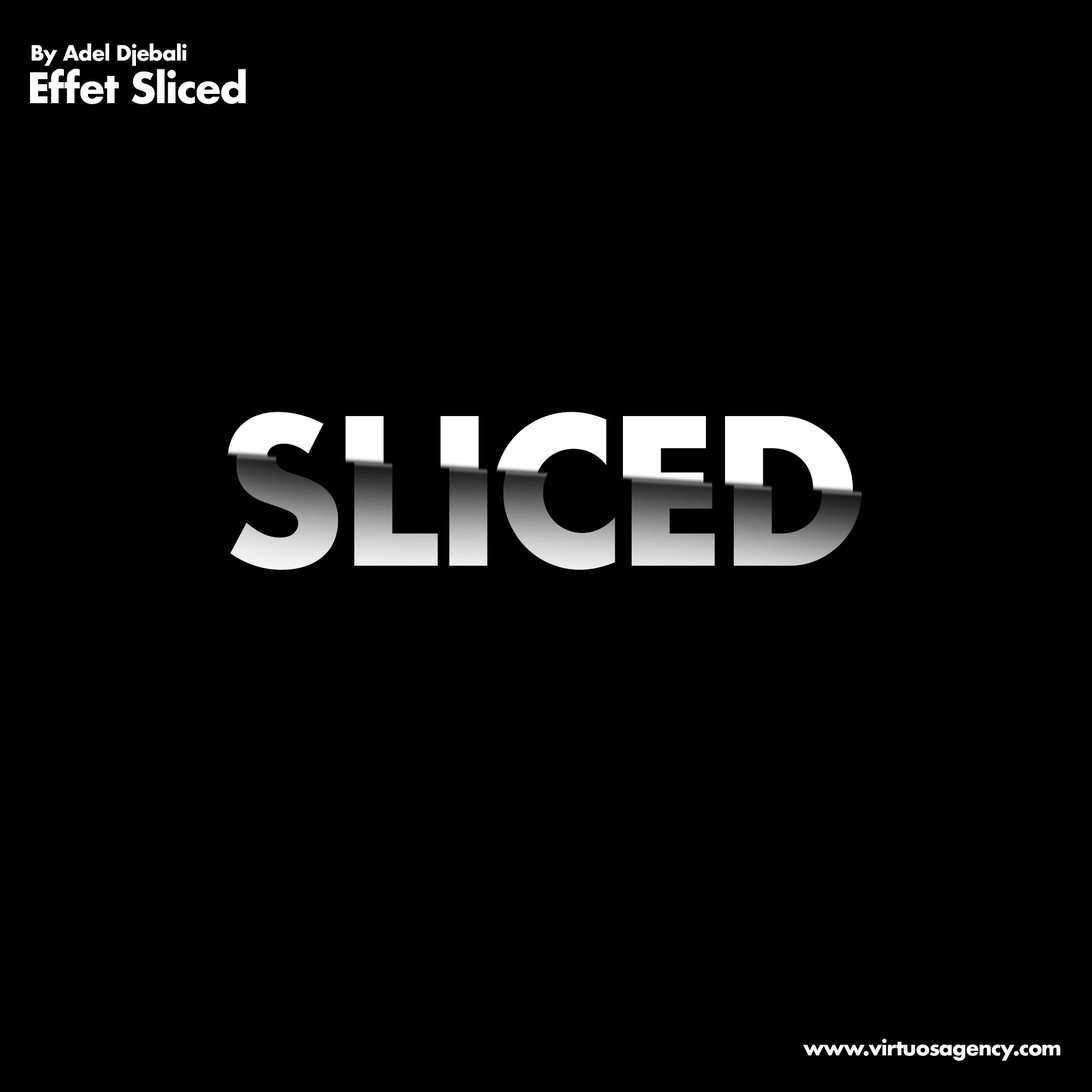
<style>
.page{position:relative;width:1092px;height:1092px;background:#000000}
.page>*{position:absolute;margin:0}
.t1{font:20.5px "Futura-Bold";letter-spacing:-0.04em;color:#fefefe}
.t2{font:40.9px "Futura-Bold";letter-spacing:-0.04em;color:#fefefe}
.t3{font:193.4px "Futura-Bold";letter-spacing:-0.04em}
</style>
<div class="page">
<p class="t1" style="left:32px;top:43px;width:155px;height:23px">By Adel Djebali</p>
<p class="t2" style="left:30px;top:69px;width:216px;height:35px">Effet Sliced</p>
<p class="t3" style="left:221px;top:412px;width:632px;height:154px">SLICED</p>
<p class="t3" style="left:230px;top:416px;width:632px;height:154px">SLICED</p>
<p class="t1" style="left:803px;top:1038px;width:257px;height:23px">www.virtuosagency.com</p>
</div>
